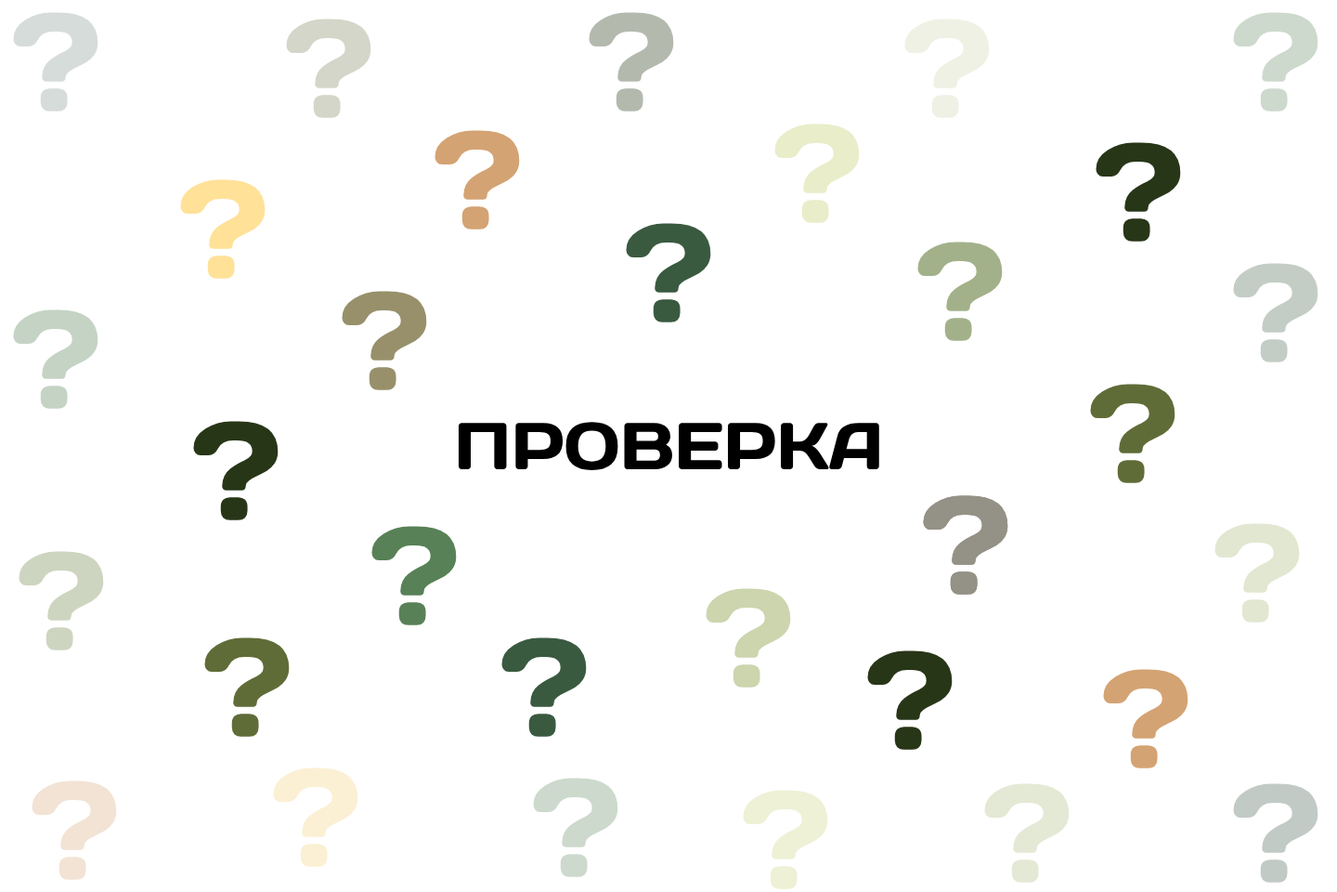
<style>
.page{position:relative;width:1337px;height:892px;background:#ffffff}
.page>*{position:absolute;margin:0}
.t1{font:139.3px "DaysOne-Regular";color:#d6dcd9}
.t2{font:139.3px "DaysOne-Regular";color:#b4b9ae}
.t3{font:139.3px "DaysOne-Regular";color:#cdd9cc}
.t4{font:139.3px "DaysOne-Regular";color:#d3d6c8}
.t5{font:139.3px "DaysOne-Regular";color:#eef1e4}
.t6{font:139.3px "DaysOne-Regular";color:#e9edc9}
.t7{font:139.3px "DaysOne-Regular";color:#d4a373}
.t8{font:139.3px "DaysOne-Regular";color:#283618}
.t9{font:139.3px "DaysOne-Regular";color:#ffe198}
.t10{font:139.3px "DaysOne-Regular";color:#3a5a40}
.t11{font:139.3px "DaysOne-Regular";color:#a3b18a}
.t12{font:139.3px "DaysOne-Regular";color:#c3cdc5}
.t13{font:139.3px "DaysOne-Regular";color:#97906b}
.t14{font:139.3px "DaysOne-Regular";color:#c5d3c4}
.t15{font:139.3px "DaysOne-Regular";color:#606c38}
.t16{font:65.9px "DaysOne-Regular";color:#000000}
.t17{font:139.3px "DaysOne-Regular";color:#949186}
.t18{font:139.3px "DaysOne-Regular";color:#588157}
.t19{font:139.3px "DaysOne-Regular";color:#e2e7d1}
.t20{font:139.3px "DaysOne-Regular";color:#cdd5c0}
.t21{font:139.3px "DaysOne-Regular";color:#ccd5ae}
.t22{font:139.3px "DaysOne-Regular";color:#faedcd}
.t23{font:139.3px "DaysOne-Regular";color:#f2e3d5}
.t24{font:139.3px "DaysOne-Regular";color:#e4e9d5}
.t25{font:139.3px "DaysOne-Regular";color:#c2cac6}
</style>
<div class="page">
<p class="t1" style="left:13px;top:12px;width:85px;height:99px">?</p>
<p class="t2" style="left:589px;top:12px;width:85px;height:99px">?</p>
<p class="t3" style="left:1233px;top:12px;width:86px;height:99px">?</p>
<p class="t4" style="left:286px;top:19px;width:86px;height:99px">?</p>
<p class="t5" style="left:905px;top:19px;width:85px;height:99px">?</p>
<p class="t6" style="left:775px;top:124px;width:85px;height:99px">?</p>
<p class="t7" style="left:435px;top:130px;width:85px;height:99px">?</p>
<p class="t8" style="left:1096px;top:142px;width:85px;height:99px">?</p>
<p class="t9" style="left:180px;top:179px;width:86px;height:100px">?</p>
<p class="t10" style="left:626px;top:223px;width:85px;height:99px">?</p>
<p class="t11" style="left:918px;top:241px;width:85px;height:100px">?</p>
<p class="t12" style="left:1233px;top:263px;width:86px;height:99px">?</p>
<p class="t13" style="left:342px;top:291px;width:85px;height:99px">?</p>
<p class="t14" style="left:13px;top:309px;width:85px;height:100px">?</p>
<p class="t15" style="left:1090px;top:384px;width:86px;height:99px">?</p>
<p class="t8" style="left:193px;top:421px;width:86px;height:99px">?</p>
<p class="t16" style="left:458px;top:422px;width:422px;height:49px">ПРОВЕРКА</p>
<p class="t17" style="left:923px;top:495px;width:86px;height:99px">?</p>
<p class="t17" style="left:923px;top:495px;width:86px;height:99px">?</p>
<p class="t18" style="left:372px;top:526px;width:85px;height:99px">?</p>
<p class="t19" style="left:1215px;top:523px;width:85px;height:99px">?</p>
<p class="t20" style="left:19px;top:551px;width:85px;height:99px">?</p>
<p class="t21" style="left:706px;top:588px;width:85px;height:99px">?</p>
<p class="t15" style="left:204px;top:637px;width:86px;height:100px">?</p>
<p class="t10" style="left:502px;top:637px;width:85px;height:100px">?</p>
<p class="t8" style="left:867px;top:650px;width:86px;height:100px">?</p>
<p class="t7" style="left:1103px;top:669px;width:86px;height:99px">?</p>
<p class="t22" style="left:273px;top:767px;width:85px;height:100px">?</p>
<p class="t23" style="left:32px;top:780px;width:85px;height:100px">?</p>
<p class="t3" style="left:533px;top:777px;width:86px;height:100px">?</p>
<p class="t24" style="left:984px;top:783px;width:86px;height:99px">?</p>
<p class="t25" style="left:1233px;top:783px;width:86px;height:99px">?</p>
<p class="t6" style="left:743px;top:789px;width:85px;height:100px">?</p>
</div>
